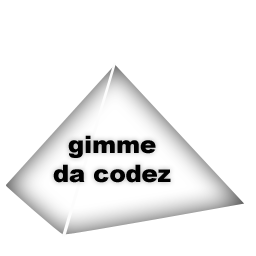
<style>
.page{position:relative;width:256px;height:256px;background:#ffffff}
.page>*{position:absolute;margin:0}
.t1{font:24.1px "Arial-Black";color:#000000}
</style>
<div class="page">
<p class="t1" style="left:53px;top:135px;width:118px;height:48px;text-align:center">gimme<br>da codez</p>
</div>
